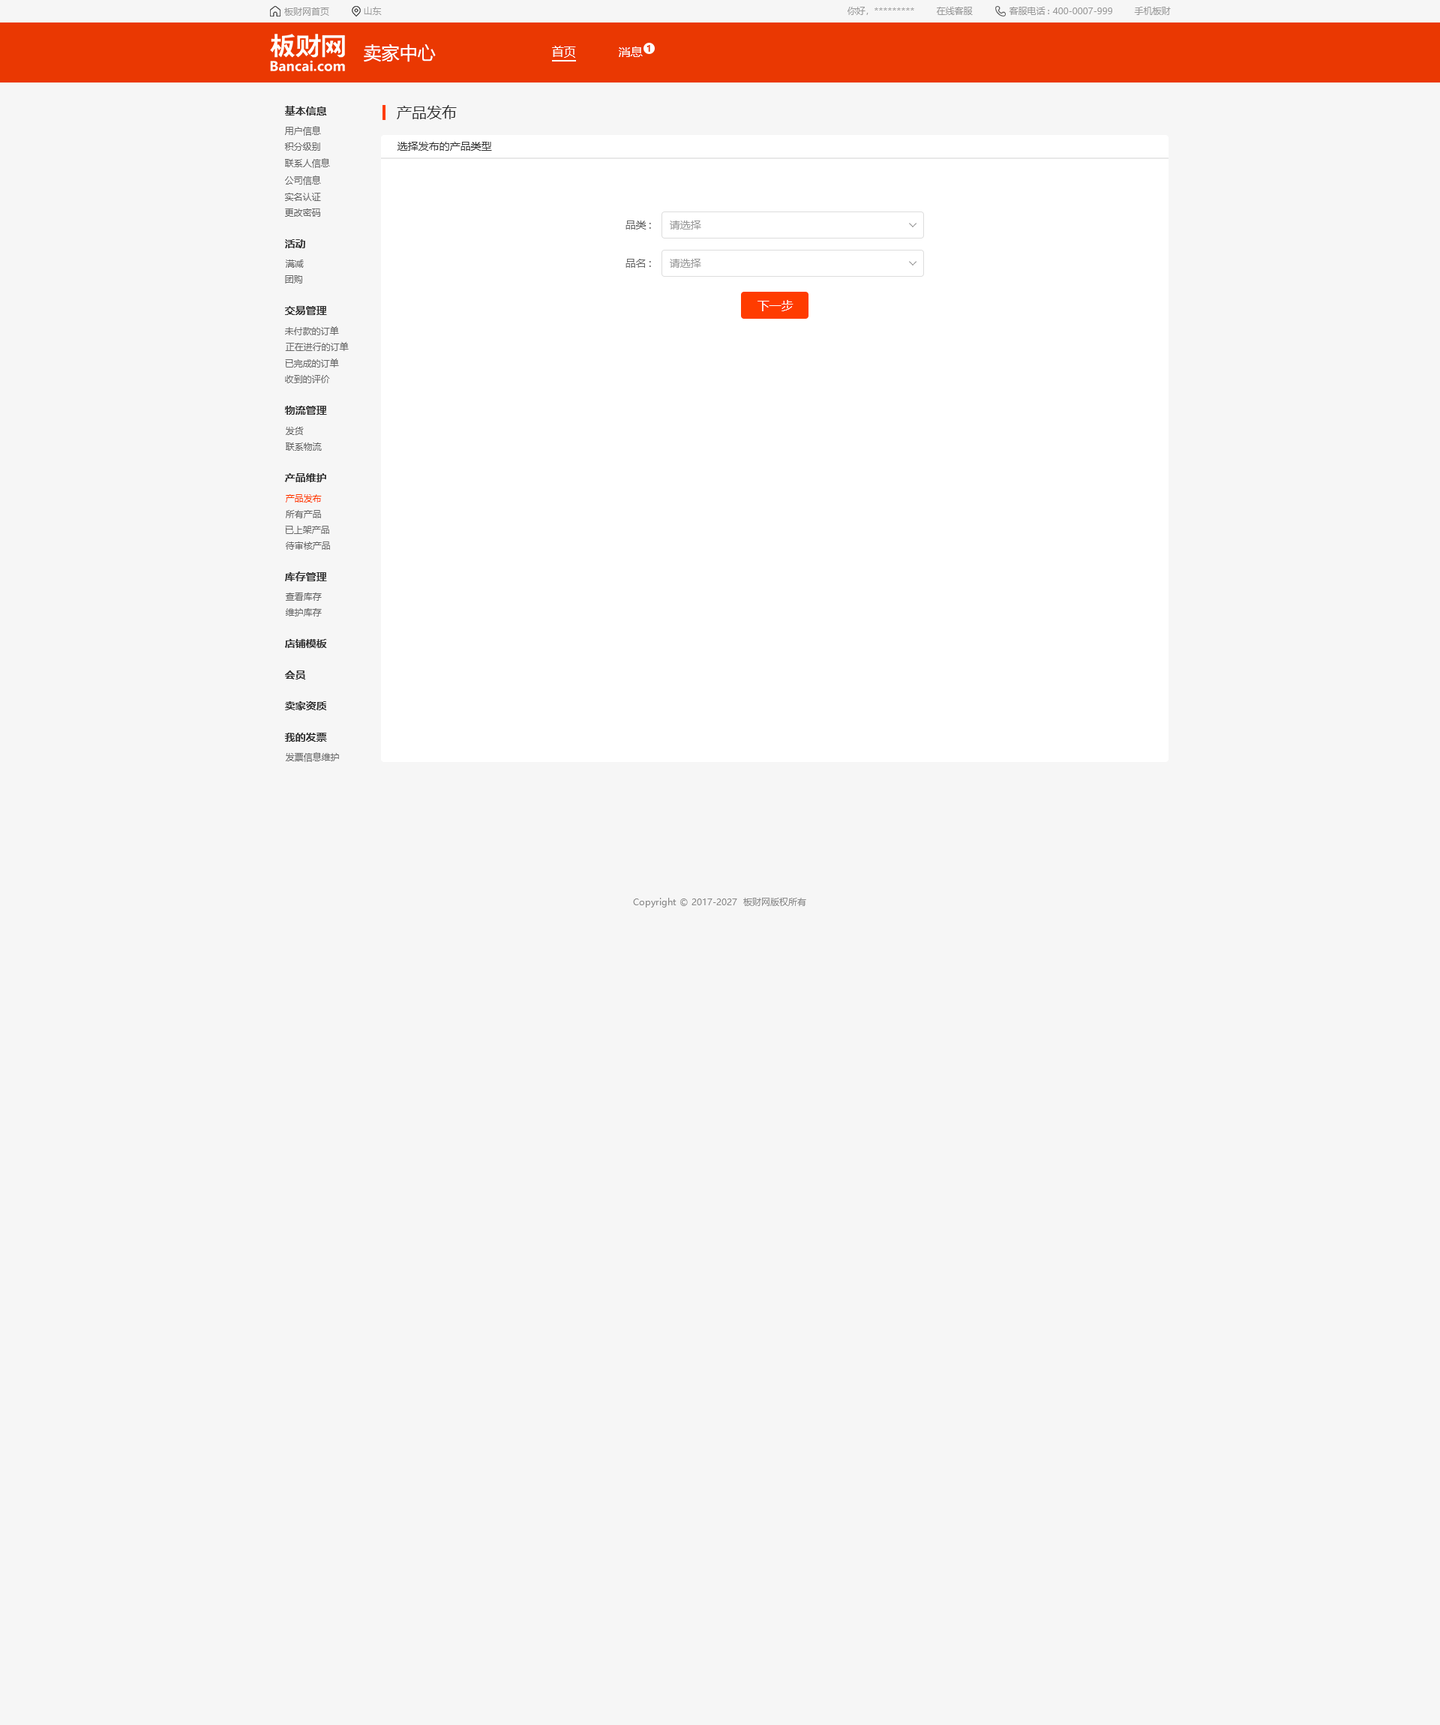
<style>
.page{position:relative;width:1440px;height:1725px;background:#f6f6f6}
.page>*{position:absolute;margin:0}
.t1{font:9px "MicrosoftYaHei";color:#999999}
.t2{font:18px "MicrosoftYaHei";color:#ffffff}
.t3{font:12px "MicrosoftYaHei";color:#ffffff}
.t4{font:9px "MicrosoftYaHei-Bold";color:#ea3802}
.t5{font:10.5px "MicrosoftYaHei-Bold";color:#333333}
.t6{font:15px "MicrosoftYaHei";color:#333333}
.t7{font:9px "MicrosoftYaHei";color:#666666}
.t8{font:10.5px "MicrosoftYaHei";color:#333333}
.t9{font:10.5px "MicrosoftYaHei";color:#666666}
.t10{font:10.5px "MicrosoftYaHei";color:#999999}
.t11{font:12px "MicrosoftYaHei";color:#fffefe}
.t12{font:9px "MicrosoftYaHei";color:#ff3c00}
.t13{font:9px "MicrosoftYaHei";color:#888888}
</style>
<div class="page">
<p class="t1" style="left:284px;top:8px;width:45px;height:8px">板财网首页</p>
<p class="t1" style="left:364px;top:7px;width:18px;height:8px">山东</p>
<p class="t1" style="left:848px;top:7px;width:66px;height:8px">你好，*********</p>
<p class="t1" style="left:937px;top:7px;width:36px;height:8px">在线客服</p>
<p class="t1" style="left:1009px;top:7px;width:103px;height:8px">客服电话: 400-0007-999</p>
<p class="t1" style="left:1134px;top:7px;width:37px;height:8px">手机板财</p>
<p class="t2" style="left:364px;top:44px;width:72px;height:18px">卖家中心</p>
<p class="t3" style="left:552px;top:46px;width:24px;height:12px">首页</p>
<p class="t3" style="left:619px;top:46px;width:24px;height:11px">消息</p>
<p class="t4" style="left:646px;top:45px;width:4px;height:7px">1</p>
<p class="t5" style="left:285px;top:106px;width:42px;height:10px">基本信息</p>
<p class="t6" style="left:397px;top:105px;width:60px;height:14px">产品发布</p>
<p class="t7" style="left:285px;top:126px;width:36px;height:10px">用户信息</p>
<p class="t7" style="left:284px;top:142px;width:36px;height:9px">积分级别</p>
<p class="t8" style="left:398px;top:142px;width:94px;height:9px">选择发布的产品类型</p>
<p class="t7" style="left:285px;top:158px;width:45px;height:10px">联系人信息</p>
<p class="t7" style="left:285px;top:176px;width:36px;height:9px">公司信息</p>
<p class="t7" style="left:285px;top:193px;width:36px;height:8px">实名认证</p>
<p class="t7" style="left:285px;top:208px;width:36px;height:9px">更改密码</p>
<p class="t9" style="left:626px;top:220px;width:25px;height:10px">品类:</p>
<p class="t10" style="left:670px;top:220px;width:31px;height:10px">请选择</p>
<p class="t5" style="left:285px;top:239px;width:20px;height:9px">活动</p>
<p class="t7" style="left:285px;top:260px;width:19px;height:8px">满减</p>
<p class="t9" style="left:626px;top:259px;width:25px;height:9px">品名:</p>
<p class="t10" style="left:670px;top:259px;width:31px;height:9px">请选择</p>
<p class="t7" style="left:285px;top:275px;width:17px;height:9px">团购</p>
<p class="t11" style="left:758px;top:300px;width:36px;height:11px">下一步</p>
<p class="t5" style="left:285px;top:306px;width:42px;height:9px">交易管理</p>
<p class="t7" style="left:285px;top:326px;width:54px;height:9px">未付款的订单</p>
<p class="t7" style="left:285px;top:342px;width:64px;height:9px">正在进行的订单</p>
<p class="t7" style="left:285px;top:358px;width:54px;height:10px">已完成的订单</p>
<p class="t7" style="left:285px;top:375px;width:45px;height:8px">收到的评价</p>
<p class="t5" style="left:285px;top:406px;width:42px;height:9px">物流管理</p>
<p class="t7" style="left:286px;top:427px;width:18px;height:8px">发货</p>
<p class="t7" style="left:286px;top:442px;width:36px;height:9px">联系物流</p>
<p class="t5" style="left:284px;top:473px;width:42px;height:9px">产品维护</p>
<p class="t12" style="left:286px;top:494px;width:36px;height:8px">产品发布</p>
<p class="t7" style="left:286px;top:510px;width:35px;height:8px">所有产品</p>
<p class="t7" style="left:285px;top:526px;width:44px;height:8px">已上架产品</p>
<p class="t7" style="left:286px;top:542px;width:44px;height:8px">待审核产品</p>
<p class="t5" style="left:285px;top:572px;width:42px;height:9px">库存管理</p>
<p class="t7" style="left:286px;top:592px;width:36px;height:9px">查看库存</p>
<p class="t7" style="left:286px;top:608px;width:36px;height:8px">维护库存</p>
<p class="t5" style="left:285px;top:639px;width:42px;height:9px">店铺模板</p>
<p class="t5" style="left:285px;top:670px;width:21px;height:10px">会员</p>
<p class="t5" style="left:285px;top:701px;width:42px;height:9px">卖家资质</p>
<p class="t5" style="left:284px;top:733px;width:43px;height:9px">我的发票</p>
<p class="t7" style="left:286px;top:752px;width:53px;height:10px">发票信息维护</p>
<p class="t13" style="left:633px;top:898px;width:173px;height:10px">Copyright © 2017-2027  板财网版权所有</p>
</div>
